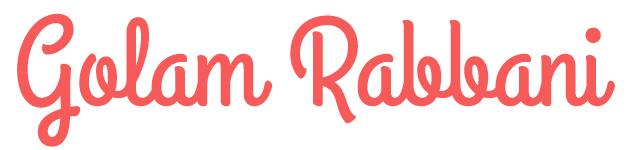
<style>
.page{position:relative;width:630px;height:150px;background:#ffffff}
.page>*{position:absolute;margin:0}
.t1{font:124.1px "GrandHotel-Regular";color:#f65b59}
</style>
<div class="page">
<p class="t1" style="left:17px;top:13px;width:598px;height:134px">Golam Rabbani</p>
</div>
